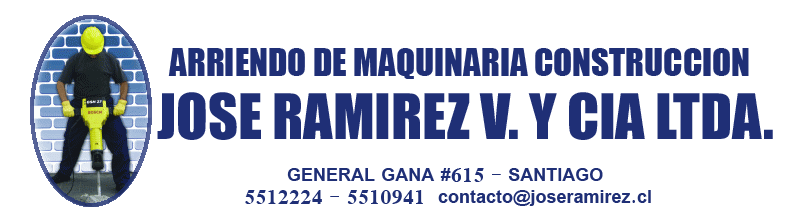
<style>
.page{position:relative;width:800px;height:220px;background:#ffffff}
.page>*{position:absolute;margin:0}
.t1{font:35px "Impact";color:#1f2f76}
.t2{font:58px "Impact";color:#1f2f76}
.t3{font:20px "SimplifiedArabic-Bold";color:#1f2f76}
</style>
<div class="page">
<p class="t1" style="left:168px;top:48px;width:581px;height:31px">ARRIENDO DE MAQUINARIA CONSTRUCCION</p>
<p class="t2" style="left:157px;top:92px;width:616px;height:48px">JOSE RAMIREZ V. Y CIA LTDA.</p>
<p class="t3" style="left:287px;top:168px;width:316px;height:14px">GENERAL GANA #615 - SANTIAGO</p>
<p class="t3" style="left:245px;top:190px;width:178px;height:14px">5512224 - 5510941</p>
<p class="t3" style="left:438px;top:190px;width:213px;height:16px">contacto@joseramirez.cl</p>
</div>
